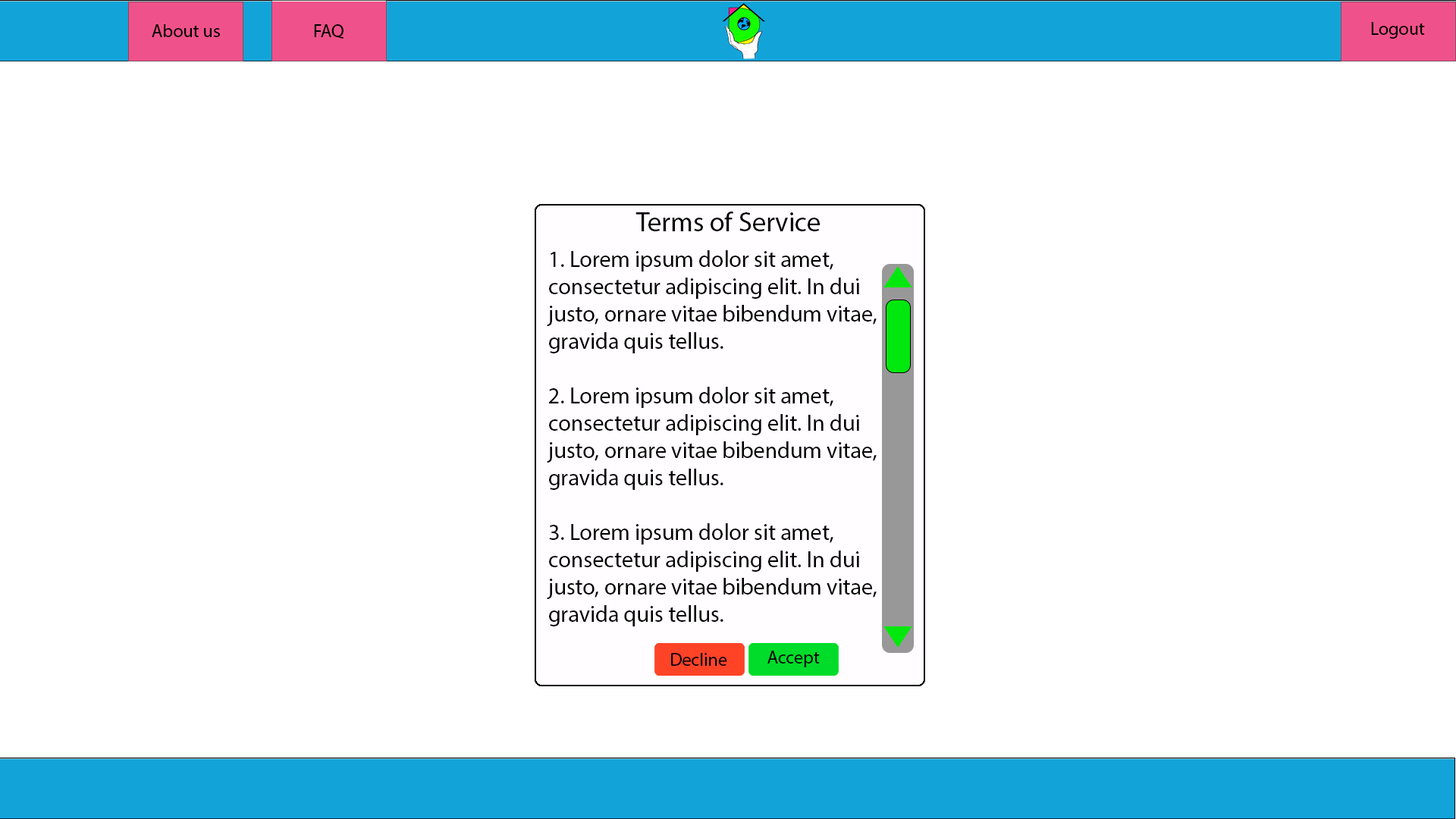
<style>
.page{position:relative;width:1456px;height:819px;background:#ffffff}
.page>*{position:absolute;margin:0}
.t1{font:18.2px "MyriadPro-Regular";color:#000000}
.t2{font:27.3px "MyriadPro-Regular";color:#000000}
.t3{font:22.7px "MyriadPro-Regular";color:#000000}
.t4{font:18.2px "MyriadPro-Regular";color:#000006}
</style>
<div class="page">
<p class="t1" style="left:152px;top:24px;width:68px;height:13px">About us</p>
<p class="t1" style="left:314px;top:24px;width:30px;height:15px">FAQ</p>
<p class="t1" style="left:1371px;top:22px;width:54px;height:17px">Logout</p>
<p class="t2" style="left:635px;top:212px;width:185px;height:19px">Terms of Service</p>
<p class="t3" style="left:547px;top:250px;width:330px;height:376px">1. Lorem ipsum dolor sit amet, consectetur adipiscing elit. In dui justo, ornare vitae bibendum vitae, gravida quis tellus.<br><br>2. Lorem ipsum dolor sit amet, consectetur adipiscing elit. In dui justo, ornare vitae bibendum vitae, gravida quis tellus.<br><br>3. Lorem ipsum dolor sit amet, consectetur adipiscing elit. In dui justo, ornare vitae bibendum vitae, gravida quis tellus.</p>
<p class="t4" style="left:671px;top:653px;width:56px;height:13px">Decline</p>
<p class="t4" style="left:767px;top:651px;width:53px;height:16px">Accept</p>
</div>
